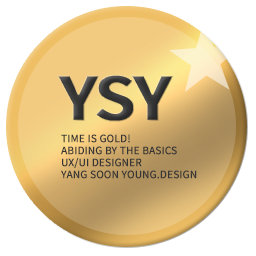
<style>
.page{position:relative;width:256px;height:256px;background:#ffffff}
.page>*{position:absolute;margin:0}
.t1{font:60px "NotoSansKR-Bold";letter-spacing:-0.05em;color:#353535;text-transform:uppercase;font-weight:bold;scale:1.12 1}
.t2{font:10px "NotoSansKR-Regular";color:#353535;text-transform:uppercase;font-weight:bold}
</style>
<div class="page">
<p class="t1" style="left:57px;top:74px;width:117px;height:48px">ySy</p>
<p class="t2" style="left:61px;top:134px;width:136px;height:45px">Time is Gold!<br>Abiding by the Basics<br>UX/UI Designer<br>YANG SOON YOUNG.design</p>
</div>
